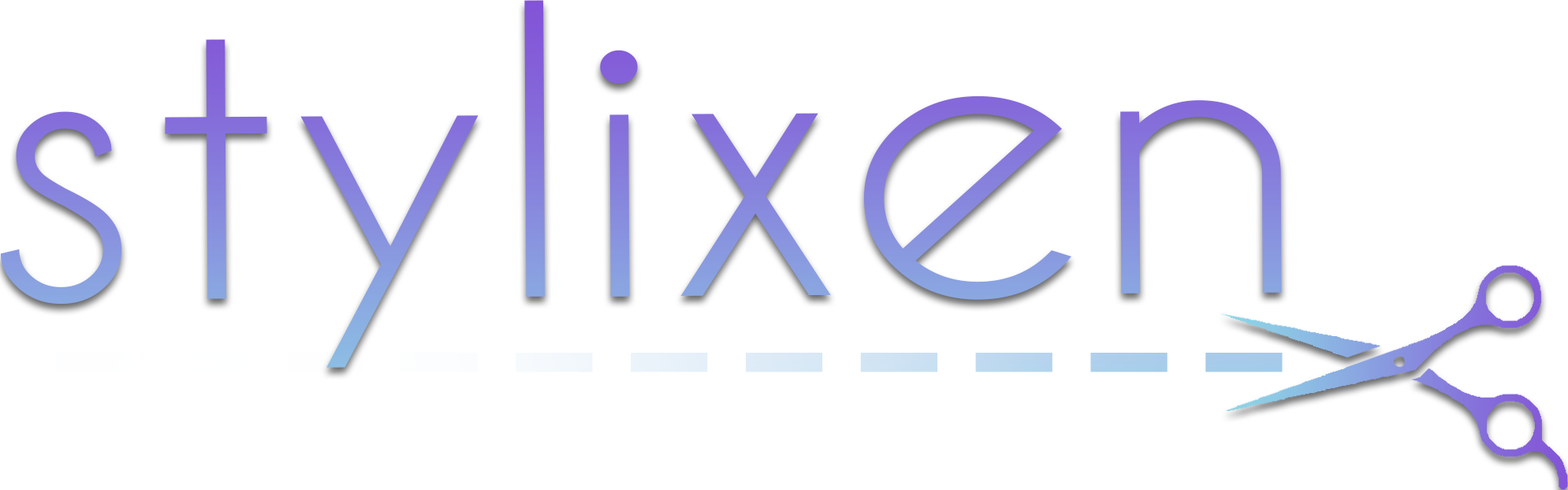
<style>
.page{position:relative;width:1568px;height:490px;background:#ffffff}
.page>*{position:absolute;margin:0}
.t1{font:378.6px "CaviarDreams";scale:1.12 1}
</style>
<div class="page">
<p class="t1" style="left:0px;top:0px;width:1282px;height:367px">stylixen</p>
</div>
